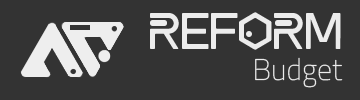
<style>
.page{position:relative;width:360px;height:100px;background:#333333}
.page>*{position:absolute;margin:0}
.t1{font:36px "ALTEREDCARBON";color:#ececec}
.t2{font:30px "TitilliumWeb-ExtraLight";color:#ececec}
</style>
<div class="page">
<p class="t1" style="left:150px;top:12px;width:191px;height:38px">REFORM</p>
<p class="t2" style="left:255px;top:57px;width:88px;height:31px">Budget</p>
</div>
